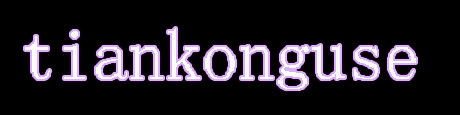
<style>
.page{position:relative;width:460px;height:115px;background:#000000}
.page>*{position:absolute;margin:0}
.t1{font:72px "·ÂËÎ-Regular";letter-spacing:0.005em;color:#ffffff}
</style>
<div class="page">
<p class="t1" style="left:25px;top:28px;width:391px;height:61px">tiankonguse</p>
</div>
